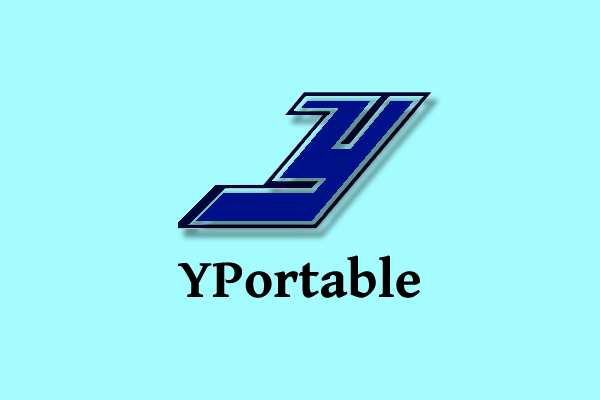
<style>
.page{position:relative;width:600px;height:400px;background:#a4fcff}
.page>*{position:absolute;margin:0}
.t1{font:55px "GentiumBookBasic-Bold";color:#000000}
</style>
<div class="page">
<p class="t1" style="left:178px;top:255px;width:243px;height:43px">YPortable</p>
</div>
